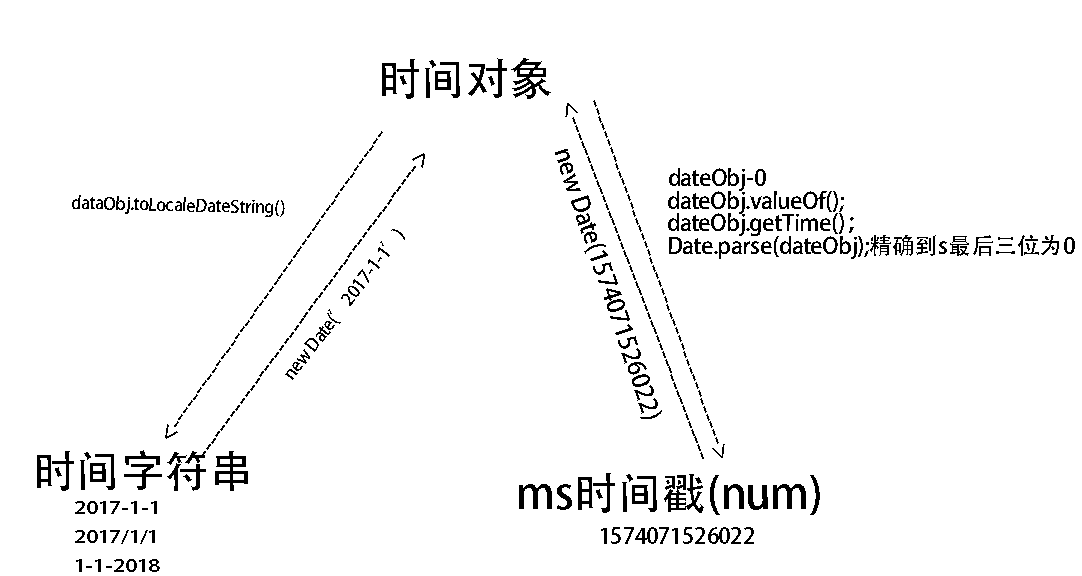
<style>
.page{position:relative;width:1082px;height:576px;background:#ffffff}
.page>*{position:absolute;margin:0}
.t1{font:43.4px "AdobeHeitiStd-Regular";color:#000000}
.t2{font:22.9px "AdobeHeitiStd-Regular";color:#000000}
.t3{font:22.8px "AdobeHeitiStd-Regular";color:#000000}
.t4{font:23.1px "AdobeHeitiStd-Regular";color:#000000}
.t5{font:24.2px "AdobeHeitiStd-Regular";color:#000000}
.t6{font:22.6px/22.6px "AdobeHeitiStd-Regular";color:#000000}
.t7{font:17.5px "AdobeHeitiStd-Regular";color:#000000}
.t8{font:16.6px "AdobeHeitiStd-Regular";color:#000000;scale:1.33 1}
.t9{font:22.1px "AdobeHeitiStd-Regular";color:#000000}
</style>
<div class="page">
<p class="t1" style="left:382px;top:58px;width:169px;height:41px">时间对象</p>
<p class="t2" style="left:593px;top:100px;width:132px;height:358px;rotate:70deg">--------------------------------------------&gt;</p>
<p class="t3" style="left:565px;top:103px;width:139px;height:356px;rotate:-111deg">--------------------------------------------&gt;</p>
<p class="t4" style="left:165px;top:131px;width:218px;height:308px;rotate:125deg">--------------------------------------------&gt;</p>
<p class="t5" style="left:555px;top:149px;width:107px;height:270px;rotate:71deg">new Date(1574071526022)</p>
<p class="t4" style="left:201px;top:153px;width:224px;height:304px;rotate:-54deg">--------------------------------------------&gt;</p>
<p class="t6" style="left:668px;top:168px;width:407px;height:91px">dateObj-0 <br>dateObj.valueOf();<br>dateObj.getTime()；<br>Date.parse(dateObj);精确到s最后三位为0</p>
<p class="t7" style="left:72px;top:195px;width:213px;height:22px;rotate:1deg">dataObj.toLocaleDateString()</p>
<p class="t7" style="left:285px;top:229px;width:120px;height:151px;rotate:-52deg">new Date(’2017-1-1’)</p>
<p class="t1" style="left:37px;top:450px;width:211px;height:41px">时间字符串</p>
<p class="t1" style="left:519px;top:473px;width:301px;height:42px">ms时间戳(num)</p>
<p class="t8" style="left:75px;top:501px;width:85px;height:71px">2017-1-1<br>2017/1/1<br>1-1-2018</p>
<p class="t9" style="left:601px;top:527px;width:153px;height:17px">1574071526022</p>
</div>
